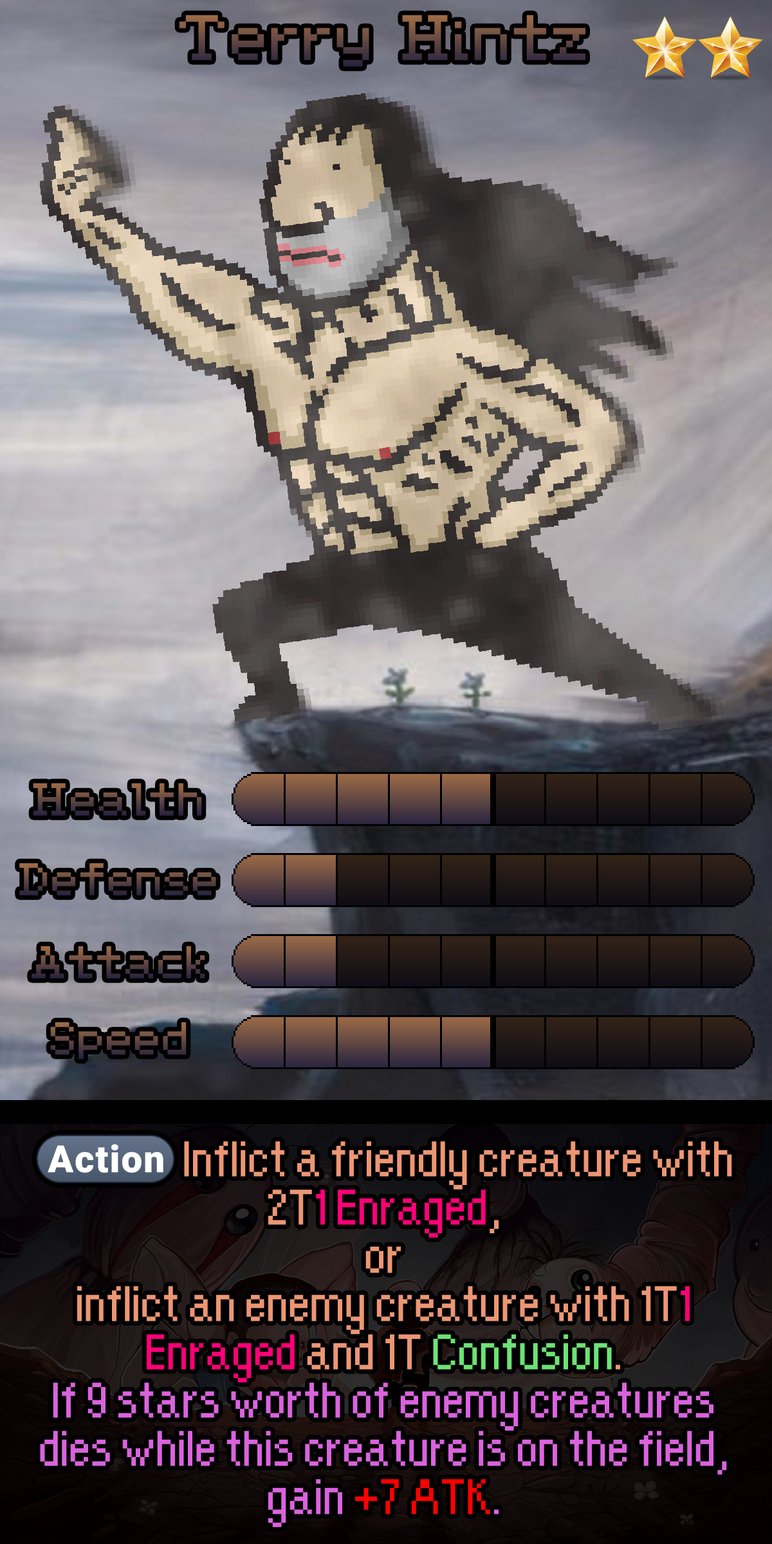
<style>
.page{position:relative;width:772px;height:1544px}
.page>*{position:absolute;margin:0}
.t1{font:80.4px "EarthboundZero"}
.t2{font:69.5px/48.3px "Apple-Kid";color:#da63dd}
.t3{font:49.4px/48.3px "stoogedings-Regular";color:#ec9674}
.t4{font:69.5px/48.3px "Apple-Kid";color:#ec9674}
.t5{font:69.5px/48.3px "Apple-Kid";color:#ff0078}
.t6{font:69.5px/48.3px "Apple-Kid";color:#6ce374}
.t7{font:69.5px/48.3px "Apple-Kid";color:#ff0000}
</style>
<div class="page">
<p class="t1" style="left:19px;top:863px;width:197px;height:33px">Defense</p>
<p class="t1" style="left:32px;top:946px;width:173px;height:33px">Attack</p>
<p class="t1" style="left:50px;top:1022px;width:137px;height:38px">Speed</p>
<p class="t2" style="left:36px;top:1134px;width:696px;height:394px;text-align:center"><span class="t3">(Action)</span><span class="t4"> Inflict a friendly creature with 2T</span><span class="t5">1 Enraged</span><span class="t4">,<br>or<br>inflict an enemy creature with 1T</span><span class="t5">1 Enraged</span><span class="t4"> and 1T </span><span class="t6">Confusion</span><span class="t4">.<br></span>If 9 stars worth of enemy creatures dies while this creature is on the field, gain <span class="t7">+7 ATK</span>.</p>
</div>
